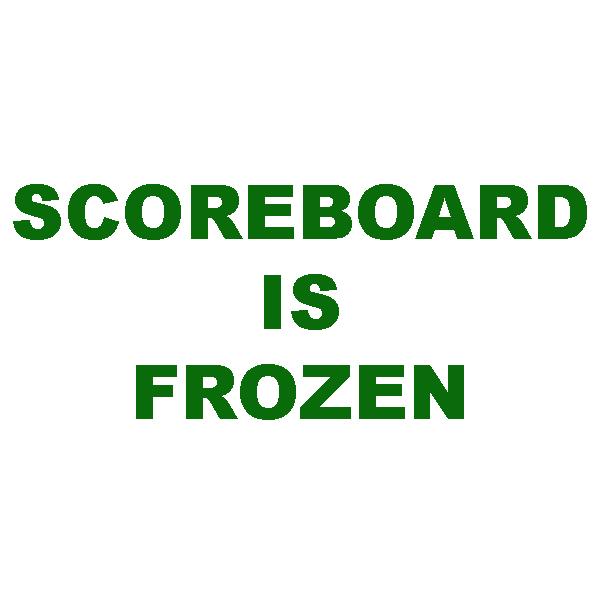
<style>
.page{position:relative;width:600px;height:600px;background:#ffffff}
.page>*{position:absolute;margin:0}
.t1{font:75px "Arial-Black";color:#0a6b0a}
</style>
<div class="page">
<p class="t1" style="left:13px;top:184px;width:574px;height:236px;text-align:center">SCOREBOARD<br>IS<br>FROZEN</p>
</div>
